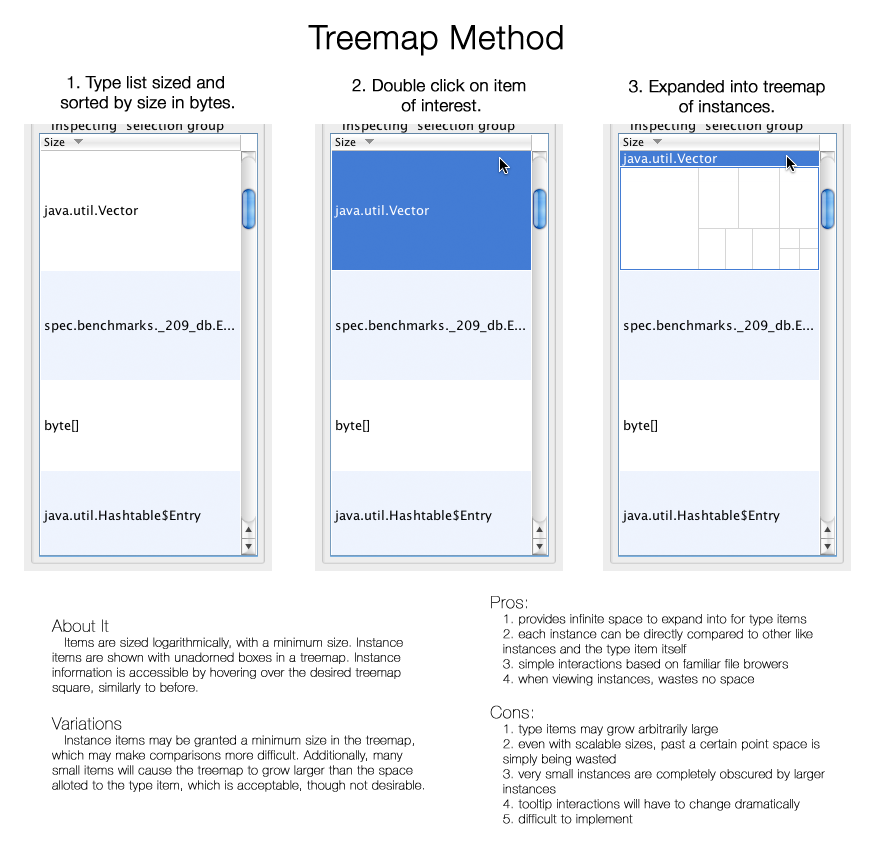
<style>
.page{position:relative;width:878px;height:847px;background:#ffffff}
.page>*{position:absolute;margin:0}
.t1{font:33.3px "HelveticaNeue-Light";color:#000000;font-weight:bold}
.t2{font:16.7px "HelveticaNeue-Light";color:#000000;font-weight:bold}
.t3{font:12.5px "HelveticaNeue-UltraLight";letter-spacing:0.025em;color:#000000;font-weight:bold}
.t4{font:16.7px "HelveticaNeue-UltraLight";letter-spacing:0.025em;color:#000000;font-weight:bold}
</style>
<div class="page">
<p class="t1" style="left:308px;top:25px;width:255px;height:31px">Treemap Method</p>
<p class="t2" style="left:60px;top:76px;width:174px;height:36px;text-align:center">1. Type list sized and <br>sorted by size in bytes.</p>
<p class="t2" style="left:352px;top:79px;width:174px;height:33px;text-align:center">2. Double click on item<br> of interest.</p>
<p class="t2" style="left:629px;top:80px;width:196px;height:33px;text-align:center">3. Expanded into treemap<br>of instances.</p>
<p class="t3" style="left:490px;top:596px;width:335px;height:230px"><span class="t4">Pros:<br></span>1. provides infinite space to expand into for type items<br>2. each instance can be directly compared to other like instances and the type item itself<br>3. simple interactions based on familiar file browers<br>4. when viewing instances, wastes no space<br><br><span class="t4">Cons:<br></span>1. type items may grow arbitrarily large<br>2. even with scalable sizes, past a certain point space is simply being wasted<br>3. very small instances are completely obscured by larger<br>instances<br>4. tooltip interactions will have to change dramatically<br>5. difficult to implement</p>
<p class="t3" style="left:51px;top:619px;width:352px;height:75px"><span class="t4">About It<br></span>Items are sized logarithmically, with a minimum size. Instance items are shown with unadorned boxes in a treemap. Instance information is accessible by hovering over the desired treemap square, similarly to before.</p>
<p class="t3" style="left:51px;top:717px;width:373px;height:75px"><span class="t4">Variations<br></span>Instance items may be granted a minimum size in the treemap, which may make comparisons more difficult. Additionally, many small items will cause the treemap to grow larger than the space alloted to the type item, which is acceptable, though not desirable.</p>
</div>
